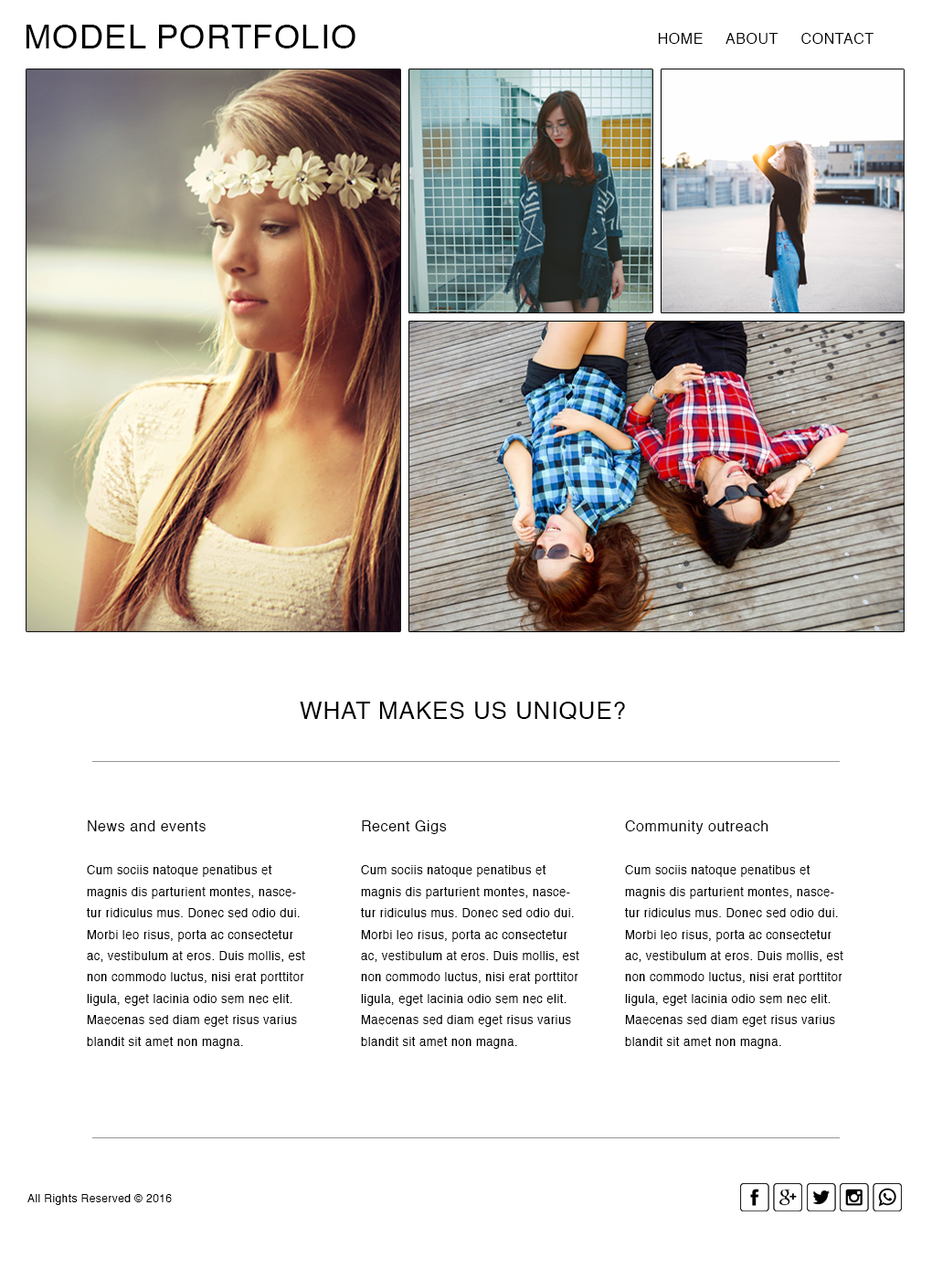
<style>
.page{position:relative;width:932px;height:1279px;background:#ffffff}
.page>*{position:absolute;margin:0}
.t1{font:32.7px "Helvetica";letter-spacing:0.035em;color:#000000;text-transform:uppercase}
.t2{font:14.8px "Helvetica";letter-spacing:0.035em;color:#000000;text-transform:uppercase}
.t3{font:23.9px "Helvetica";letter-spacing:0.035em;color:#000000;text-transform:uppercase}
.t4{font:11.9px/21.4px "Helvetica";letter-spacing:0.035em;color:#000000}
.t5{font:14.6px/21.4px "Helvetica";letter-spacing:0.035em;color:#000000}
.t6{font:11px "Helvetica";letter-spacing:0.035em;color:#000000}
</style>
<div class="page">
<p class="t1" style="left:26px;top:25px;width:329px;height:23px">Model Portfolio</p>
<p class="t2" style="left:658px;top:33px;width:216px;height:11px">Home     about     Contact</p>
<p class="t3" style="left:300px;top:702px;width:325px;height:18px">What makes us unique?</p>
<p class="t4" style="left:87px;top:821px;width:218px;height:228px"><span class="t5">News and events<br><br></span>Cum sociis natoque penatibus et magnis dis parturient montes, nascetur ridiculus mus. Donec sed odio dui. Morbi leo risus, porta ac consectetur ac, vestibulum at eros. Duis mollis, est non commodo luctus, nisi erat porttitor ligula, eget lacinia odio sem nec elit. Maecenas sed diam eget risus varius blandit sit amet non magna.</p>
<p class="t4" style="left:361px;top:821px;width:218px;height:228px"><span class="t5">Recent Gigs<br><br></span>Cum sociis natoque penatibus et magnis dis parturient montes, nascetur ridiculus mus. Donec sed odio dui. Morbi leo risus, porta ac consectetur ac, vestibulum at eros. Duis mollis, est non commodo luctus, nisi erat porttitor ligula, eget lacinia odio sem nec elit. Maecenas sed diam eget risus varius blandit sit amet non magna.</p>
<p class="t4" style="left:625px;top:821px;width:218px;height:228px"><span class="t5">Community outreach<br><br></span>Cum sociis natoque penatibus et magnis dis parturient montes, nascetur ridiculus mus. Donec sed odio dui. Morbi leo risus, porta ac consectetur ac, vestibulum at eros. Duis mollis, est non commodo luctus, nisi erat porttitor ligula, eget lacinia odio sem nec elit. Maecenas sed diam eget risus varius blandit sit amet non magna.</p>
<p class="t6" style="left:27px;top:1194px;width:145px;height:11px">All Rights Reserved © 2016</p>
</div>
